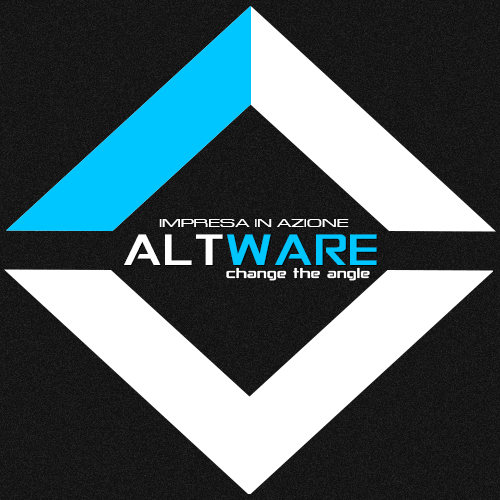
<style>
.page{position:relative;width:500px;height:500px;background:#ffffff}
.page>*{position:absolute;margin:0}
.t1{font:12.4px "Acens";letter-spacing:0.015em;color:#ffffff;scale:1.51 1}
.t2{font:47px "Conviction";letter-spacing:0.015em;color:#00c6ff;scale:1.51 1}
.t3{font:47px "Conviction";letter-spacing:0.015em;color:#ffffff;scale:1.51 1}
.t4{font:15.2px "Conviction";letter-spacing:0.015em;color:#ffffff;scale:1.51 1}
</style>
<div class="page">
<p class="t1" style="left:159px;top:219px;width:190px;height:8px">IMPRESA IN AZIONE</p>
<p class="t2" style="left:124px;top:234px;width:253px;height:31px"><span class="t3">ALT</span>WARE</p>
<p class="t4" style="left:226px;top:267px;width:144px;height:14px">change the angle</p>
</div>
